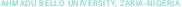
<style>
.page{position:relative;width:182px;height:7px;background:#ffffff}
.page>*{position:absolute;margin:0}
.t1{font:7.9px "AcuminConcept-Regular";letter-spacing:0.075em;color:#96e1d7;scale:0.94 1}
</style>
<div class="page">
<p class="t1" style="left:1px;top:0px;width:179px;height:7px">AHMADU BELLO UNIVERSITY, ZARIA-NIGERIA</p>
</div>
